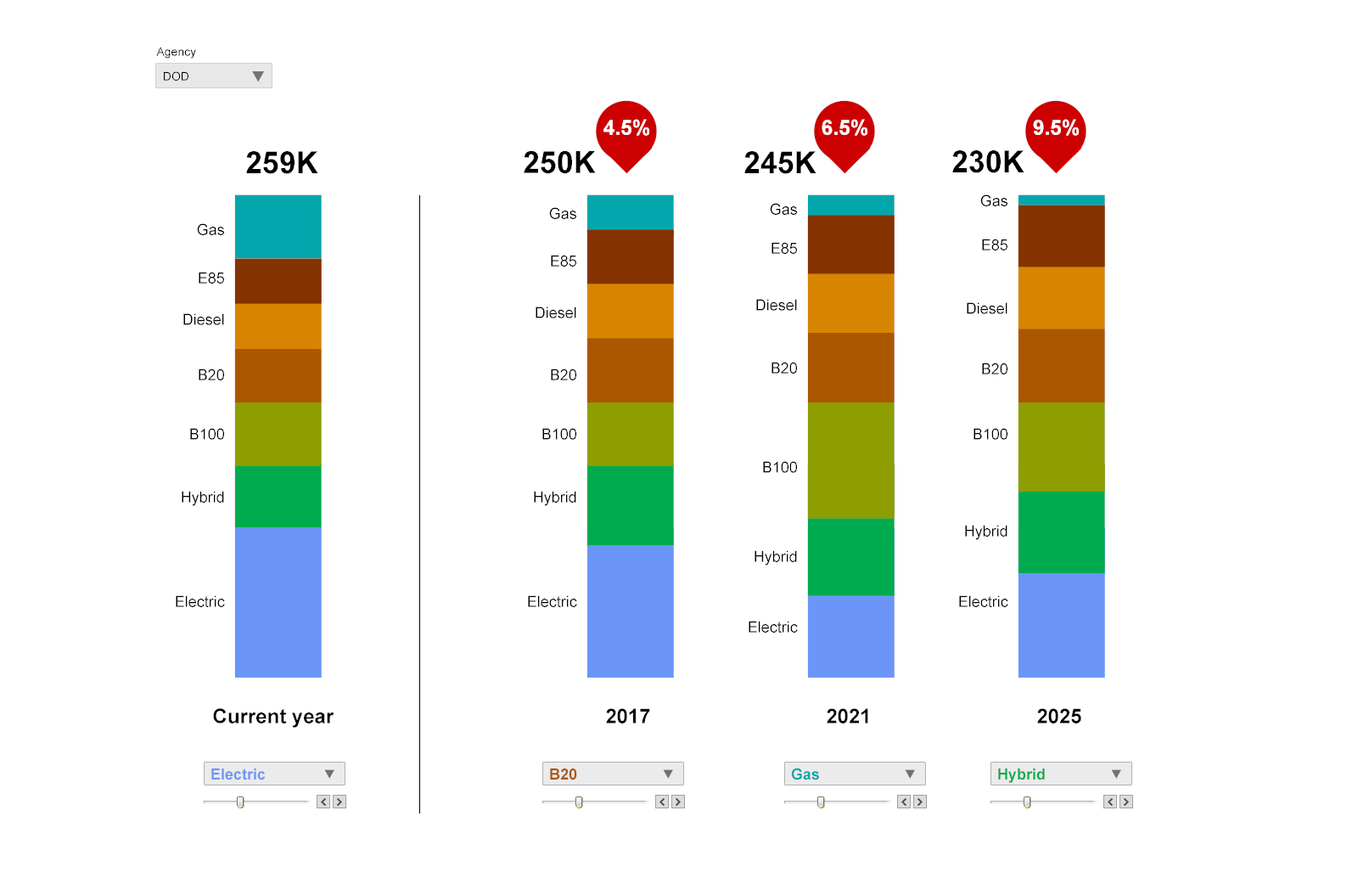
<style>
.page{position:relative;width:1358px;height:878px;background:#ffffff}
.page>*{position:absolute;margin:0}
.t1{font:11.9px "ArialMT";color:#000000}
.t2{font:21.1px "Arial-BoldMT";color:#ffffff}
.t3{font:30.6px "Arial-BoldMT";color:#000000}
.t4{font:20.4px "Arial-BoldMT";color:#000000}
.t5{font:15.3px "ArialMT";color:#000000}
.t6{font:15.3px "Arial-BoldMT";color:#6b95f6}
.t7{font:15.3px "Arial-BoldMT";color:#ab5700}
.t8{font:15.3px "Arial-BoldMT";color:#00a6ab}
.t9{font:15.3px "Arial-BoldMT";color:#00ab4f}
</style>
<div class="page">
<p class="t1" style="left:156px;top:47px;width:40px;height:12px">Agency</p>
<p class="t1" style="left:164px;top:71px;width:24px;height:10px">DOD</p>
<p class="t2" style="left:604px;top:119px;width:45px;height:17px">4.5%</p>
<p class="t2" style="left:822px;top:119px;width:46px;height:17px">6.5%</p>
<p class="t2" style="left:1033px;top:119px;width:46px;height:17px">9.5%</p>
<p class="t3" style="left:246px;top:151px;width:72px;height:23px"><span class="t4"><br></span>259K</p>
<p class="t3" style="left:524px;top:150px;width:72px;height:24px">250K</p>
<p class="t3" style="left:745px;top:151px;width:72px;height:23px"><span class="t4"><br></span>245K</p>
<p class="t3" style="left:953px;top:150px;width:72px;height:23px"><span class="t4"><br></span>230K</p>
<p class="t5" style="left:981px;top:194px;width:27px;height:12px">Gas</p>
<p class="t5" style="left:549px;top:207px;width:27px;height:12px">Gas</p>
<p class="t5" style="left:770px;top:203px;width:27px;height:12px">Gas</p>
<p class="t5" style="left:197px;top:223px;width:27px;height:12px">Gas</p>
<p class="t5" style="left:772px;top:242px;width:25px;height:12px">E85</p>
<p class="t5" style="left:982px;top:239px;width:26px;height:11px">E85</p>
<p class="t5" style="left:551px;top:255px;width:25px;height:12px">E85</p>
<p class="t5" style="left:199px;top:272px;width:25px;height:12px">E85</p>
<p class="t5" style="left:756px;top:299px;width:41px;height:12px">Diesel</p>
<p class="t5" style="left:967px;top:302px;width:41px;height:12px">Diesel</p>
<p class="t5" style="left:183px;top:313px;width:41px;height:12px">Diesel</p>
<p class="t5" style="left:536px;top:306px;width:40px;height:12px">Diesel</p>
<p class="t5" style="left:772px;top:362px;width:25px;height:12px">B20</p>
<p class="t5" style="left:982px;top:363px;width:26px;height:11px">B20</p>
<p class="t5" style="left:199px;top:368px;width:25px;height:12px">B20</p>
<p class="t5" style="left:551px;top:368px;width:25px;height:12px">B20</p>
<p class="t5" style="left:190px;top:428px;width:34px;height:12px">B100</p>
<p class="t5" style="left:542px;top:428px;width:34px;height:12px">B100</p>
<p class="t5" style="left:974px;top:428px;width:34px;height:12px">B100</p>
<p class="t5" style="left:763px;top:461px;width:34px;height:12px">B100</p>
<p class="t5" style="left:182px;top:491px;width:42px;height:15px">Hybrid</p>
<p class="t5" style="left:534px;top:491px;width:42px;height:15px">Hybrid</p>
<p class="t5" style="left:965px;top:525px;width:43px;height:15px">Hybrid</p>
<p class="t5" style="left:755px;top:550px;width:42px;height:15px">Hybrid</p>
<p class="t5" style="left:176px;top:595px;width:49px;height:12px">Electric</p>
<p class="t5" style="left:528px;top:595px;width:49px;height:12px">Electric</p>
<p class="t5" style="left:959px;top:595px;width:50px;height:12px">Electric</p>
<p class="t5" style="left:749px;top:621px;width:49px;height:11px">Electric</p>
<p class="t4" style="left:213px;top:708px;width:121px;height:20px">Current year</p>
<p class="t4" style="left:606px;top:708px;width:44px;height:15px">2017</p>
<p class="t4" style="left:827px;top:708px;width:42px;height:15px">2021</p>
<p class="t4" style="left:1037px;top:708px;width:45px;height:15px">2025</p>
<p class="t6" style="left:211px;top:768px;width:55px;height:12px">Electric</p>
<p class="t7" style="left:550px;top:768px;width:27px;height:12px">B20</p>
<p class="t8" style="left:791px;top:767px;width:28px;height:13px">Gas</p>
<p class="t9" style="left:998px;top:768px;width:47px;height:15px">Hybrid</p>
</div>
